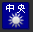
<style>
.page{position:relative;width:33px;height:32px;background:#000090}
.page>*{position:absolute;margin:0}
.t1{font:10.4px "SimSun";color:#ffffff}
</style>
<div class="page">
<p class="t1" style="left:6px;top:4px;width:19px;height:9px">中央</p>
</div>
